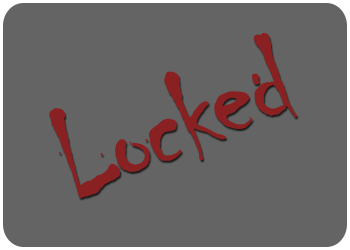
<style>
.page{position:relative;width:350px;height:250px;background:#646464}
.page>*{position:absolute;margin:0}
.t1{font:130.1px "Chiller-Regular";letter-spacing:-0.025em;color:#892122}
</style>
<div class="page">
<p class="t1" style="left:49px;top:33px;width:248px;height:165px;rotate:-23deg">Locked</p>
</div>
